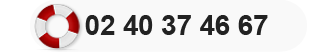
<style>
.page{position:relative;width:320px;height:52px;background:#f9f9f9}
.page>*{position:absolute;margin:0}
.t1{font:27.5px "Arial-BoldMT";color:#222222}
</style>
<div class="page">
<p class="t1" style="left:85px;top:15px;width:183px;height:20px">02 40 37 46 67</p>
</div>
